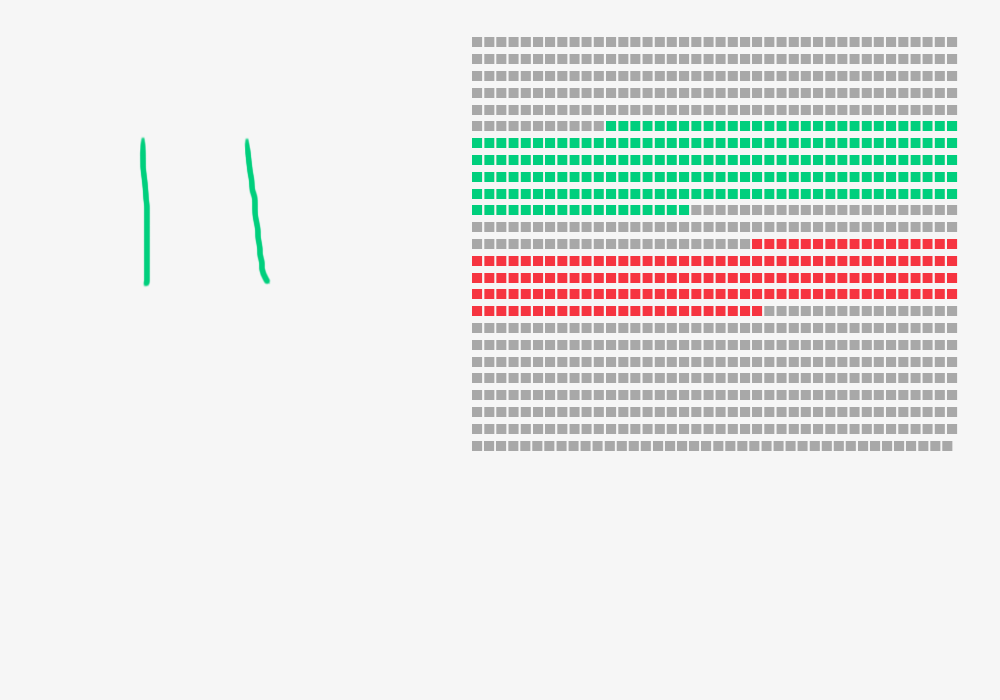
<style>
.page{position:relative;width:1000px;height:700px;background:#f6f6f6}
.page>*{position:absolute;margin:0}
.t1{font:14px "SegoeUI";color:#a8a8a8}
.t2{font:14px "SegoeUI";color:#00cf7d}
.t3{font:14px "SegoeUI";color:#f63440}
</style>
<div class="page">
<p class="t1" style="left:472px;top:37px;width:486px;height:414px;text-align:justify">■■■■■■■■■■■■■■■■■■■■■■■■■■■■■■■■■■■■■■■■■■■■■■■■■■■■■■■■■■■■■■■■■■■■■■■■■■■■■■■■■■■■■■■■■■■■■■■■■■■■■■■■■■■■■■■■■■■■■■■■■■■■■■■■■■■■■■■■■■■■■■■■■■■■■■■■■■■■■■■■■■■■■■■■■■■■■■■■■■■■■■■■■■■■■■■■■■■■■■■■■■■■■■■■■■■<span class="t2">■■■■■■■■■■■■■■■■■■■■■■■■■■■■■■■■■■■■■■■■■■■■■■■■■■■■■■■■■■■■■■■■■■■■■■■■■■■■■■■■■■■■■■■■■■■■■■■■■■■■■■■■■■■■■■■■■■■■■■■■■■■■■■■■■■■■■■■■■■■■■■■■■■■■■■■■■■■■■■■■■■■■■■■■■■■■■■■■■■■■■■■■■■■■■■■■■■■■■■■■■■■■■■■</span>■■■■■■■■■■■■■■■■■■■■■■■■■■■■■■■■■■■■■■■■■■■■■■■■■■■■■■■■■■■■■■■■■■■■■■■■■■■■■■■■■■■■■<span class="t3">■■■■■■■■■■■■■■■■■■■■■■■■■■■■■■■■■■■■■■■■■■■■■■■■■■■■■■■■■■■■■■■■■■■■■■■■■■■■■■■■■■■■■■■■■■■■■■■■■■■■■■■■■■■■■■■■■■■■■■■■■■■■■■■■■■■■■■■■■■■■■■■■■■■■■■■■■■■■■■■■■</span>■■■■■■■■■■■■■■■■■■■■■■■■■■■■■■■■■■■■■■■■■■■■■■■■■■■■■■■■■■■■■■■■■■■■■■■■■■■■■■■■■■■■■■■■■■■■■■■■■■■■■■■■■■■■■■■■■■■■■■■■■■■■■■■■■■■■■■■■■■■■■■■■■■■■■■■■■■■■■■■■■■■■■■■■■■■■■■■■■■■■■■■■■■■■■■■■■■■■■■■■■■■■■■■■■■■■■■■■■■■■■■■■■■■■■■■■■■■■■■■■■■■■■■■■■■■■■■■■■■■■■■■■■■■■■■■■■■■■■■■■■■■■■■■■■■■■■■■■■■■■■■■■■■■■■■■■■■■■■■■■■■■■■■■■■■■■■■■■</p>
</div>
